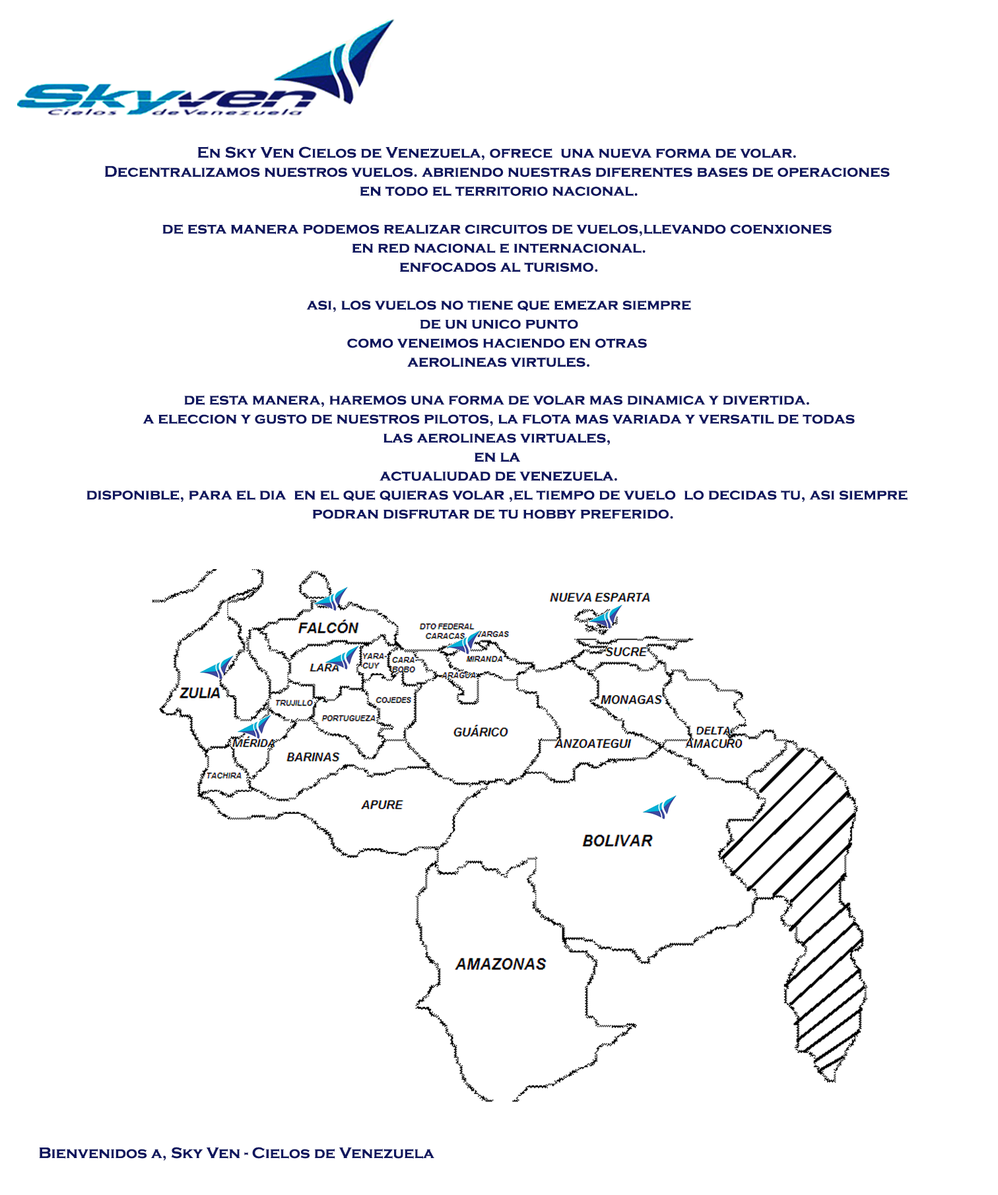
<style>
.page{position:relative;width:998px;height:1195px;background:#ffffff}
.page>*{position:absolute;margin:0}
.t1{font:15.8px "CopperplateGothic-Bold";color:#0e165e}
</style>
<div class="page">
<p class="t1" style="left:86px;top:146px;width:821px;height:373px;text-align:center">En Sky Ven Cielos de Venezuela, ofrece  una nueva forma de volar. <br>Decentralizamos nuestros vuelos. abriendo nuestras diferentes bases de operaciones <br>en todo el territorio nacional.<br><br>de esta manera podemos realizar circuitos de vuelos,llevando coenxiones <br>en red nacional e internacional.<br>enfocados al turismo.<br>  <br>asi, los vuelos no tiene que emezar siempre<br> de un unico punto <br>como veneimos haciendo en otras <br>aerolineas virtules.<br><br>de esta manera, haremos una forma de volar mas dinamica y divertida. <br> a eleccion y gusto de nuestros pilotos, la flota mas variada y versatil de todas <br>las aerolineas virtuales, <br>en la <br>actualiudad de venezuela.<br>disponible, para el dia  en el que quieras volar ,el tiempo de vuelo  lo decidas tu, asi siempre <br>podran disfrutar de tu hobby preferido.</p>
<p class="t1" style="left:39px;top:1147px;width:395px;height:14px">Bienvenidos a, Sky Ven - Cielos de Venezuela</p>
</div>
